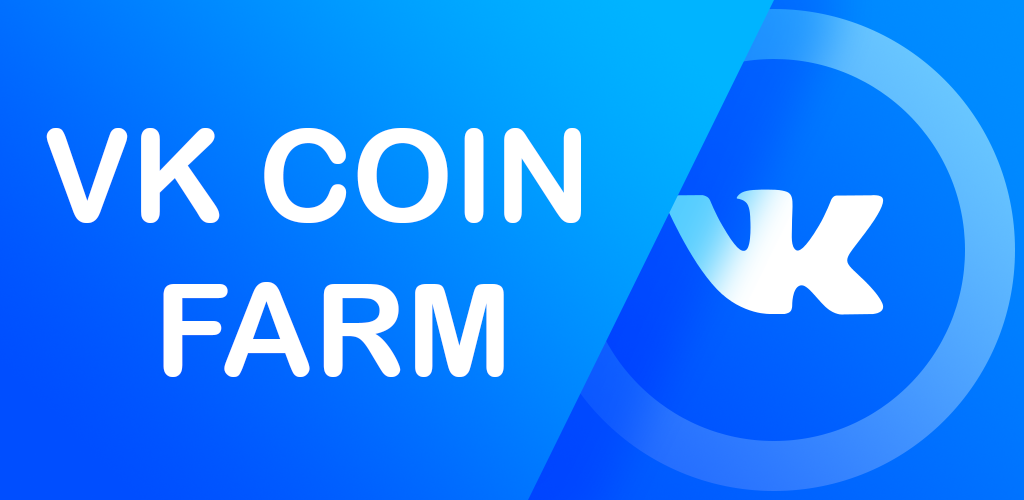
<style>
.page{position:relative;width:1024px;height:500px}
.page>*{position:absolute;margin:0}
.t1{font:128px "ArialRoundedMTBold";color:#ffffff}
</style>
<div class="page">
<p class="t1" style="left:46px;top:128px;width:535px;height:249px;text-align:center">VK COIN <br>FARM</p>
</div>
